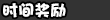
<style>
.page{position:relative;width:110px;height:20px;background:#333333}
.page>*{position:absolute;margin:0}
.t1{font:16px "DFPHaiBaoW12";color:#fefefe}
</style>
<div class="page">
<p class="t1" style="left:3px;top:3px;width:63px;height:15px">时间奖励</p>
</div>
